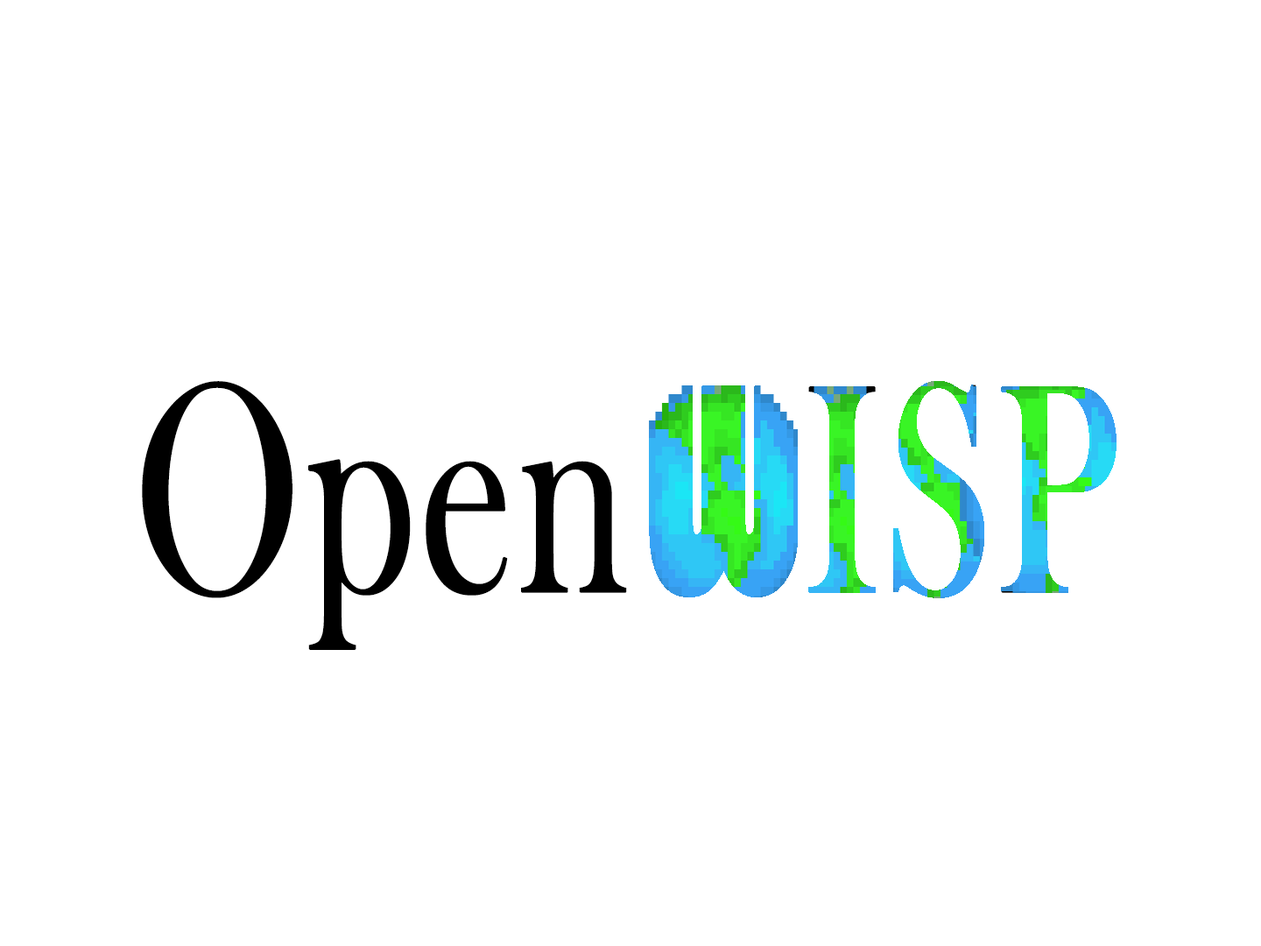
<style>
.page{position:relative;width:1261px;height:946px;background:#ffffff}
.page>*{position:absolute;margin:0}
.t1{font:306.5px "BaskOldFace";font-weight:bold;scale:0.68 1}
.t2{font:306.5px "Bauhaus93";font-weight:bold;scale:0.68 1}
</style>
<div class="page">
<p class="t1" style="left:142px;top:381px;width:974px;height:269px"><span class="t2">  </span>Open   ISP</p>
</div>
